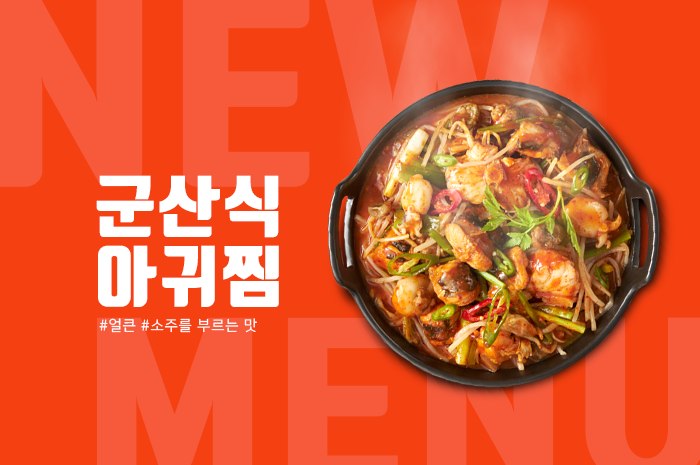
<style>
.page{position:relative;width:700px;height:465px;background:#f54011}
.page>*{position:absolute;margin:0}
.t1{font:66.6px "TmonMonsoriOTFBlack";letter-spacing:0.05em;color:#ffffff}
.t2{font:14.7px "NanumSquareR";letter-spacing:0.05em;color:#ffffff}
</style>
<div class="page">
<p class="t1" style="left:96px;top:175px;width:183px;height:63px">군산식</p>
<p class="t1" style="left:98px;top:245px;width:181px;height:62px">아귀찜</p>
<p class="t2" style="left:99px;top:318px;width:158px;height:15px">#얼큰 #소주를 부르는 맛</p>
</div>
